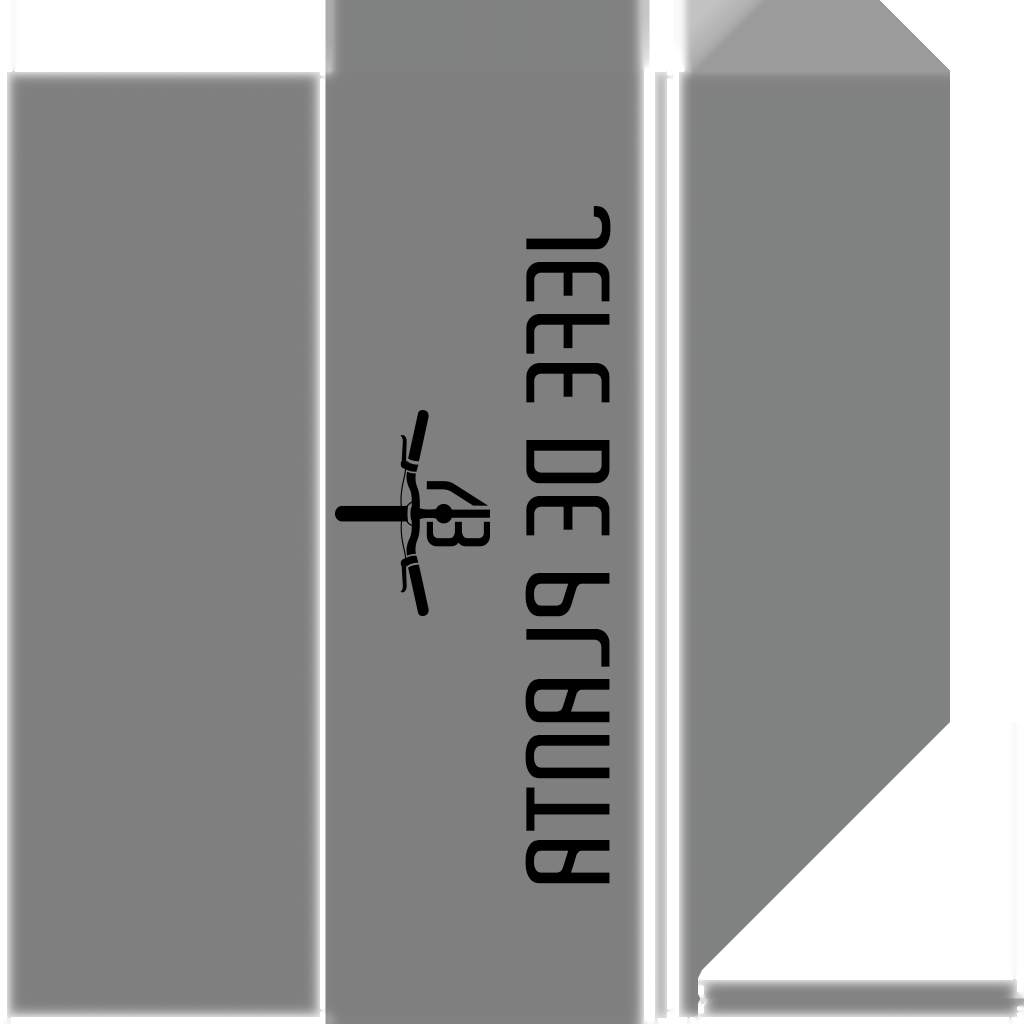
<style>
.page{position:relative;width:1024px;height:1024px;background:#7f7f7f}
.page>*{position:absolute;margin:0}
.t1{font:114.8px "Aldo-SemiBold";color:#000000;scale:1.11 1}
</style>
<div class="page">
<p class="t1" style="left:525px;top:206px;width:86px;height:678px;rotate:90deg">JEFE DE PLANTA</p>
</div>
